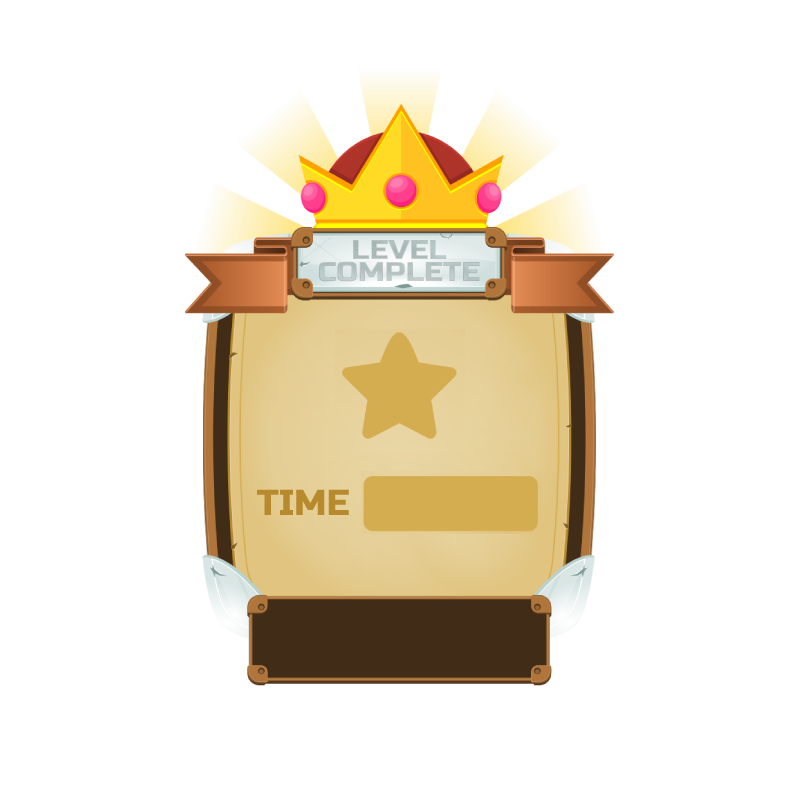
<style>
.page{position:relative;width:800px;height:800px;background:#ffffff}
.page>*{position:absolute;margin:0}
.t1{font:27px/22px "RussoOne-Regular";color:#b5c2c1;scale:1.1 1}
.t2{font:36px "RussoOne-Regular";color:#b78b2d}
</style>
<div class="page">
<p class="t1" style="left:319px;top:240px;width:161px;height:42px;text-align:center">LEVEL<br>COMPLETE</p>
<p class="t2" style="left:257px;top:489px;width:92px;height:26px">TIME</p>
</div>
